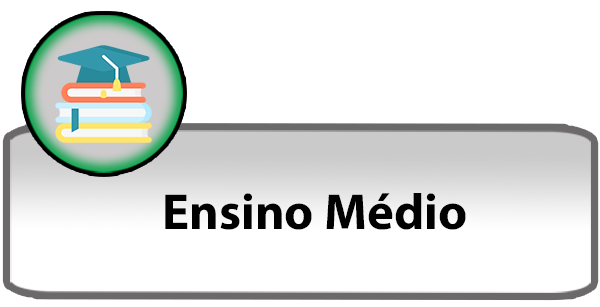
<style>
.page{position:relative;width:600px;height:307px;background:#ffffff}
.page>*{position:absolute;margin:0}
.t1{font:50.8px "MyriadConceptRoman-Bold";color:#000000}
</style>
<div class="page">
<p class="t1" style="left:165px;top:193px;width:301px;height:37px">Ensino Médio</p>
</div>
